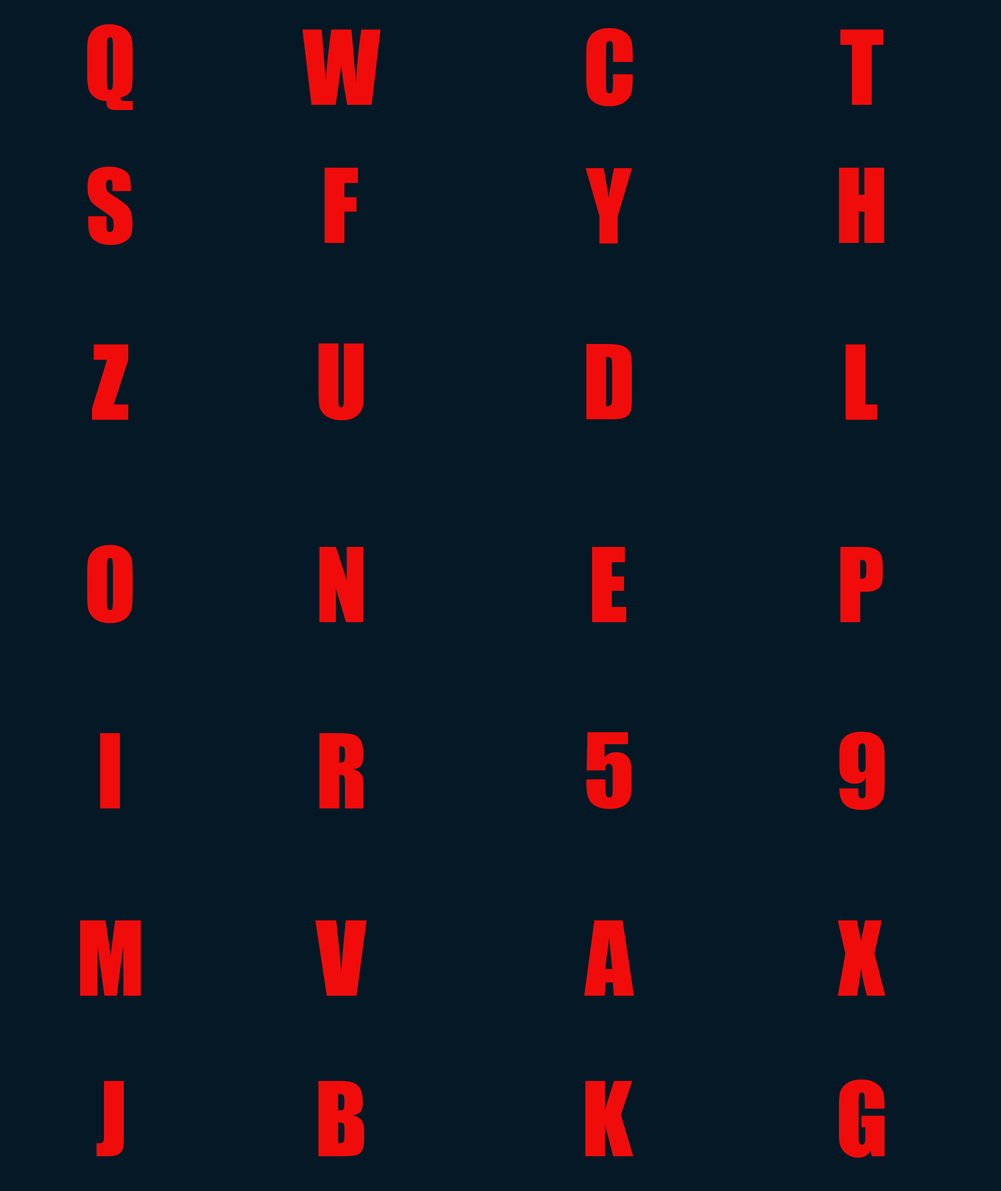
<style>
.page{position:relative;width:1001px;height:1191px;background:#041925}
.page>*{position:absolute;margin:0}
.t1{font:95.3px "Impact";color:#f10c0c}
</style>
<div class="page">
<p class="t1" style="left:87px;top:24px;width:46px;height:86px">Q</p>
<p class="t1" style="left:302px;top:30px;width:78px;height:75px">W</p>
<p class="t1" style="left:586px;top:28px;width:47px;height:78px">C</p>
<p class="t1" style="left:840px;top:30px;width:44px;height:75px">T</p>
<p class="t1" style="left:87px;top:167px;width:45px;height:78px">S</p>
<p class="t1" style="left:325px;top:168px;width:33px;height:75px">F</p>
<p class="t1" style="left:585px;top:168px;width:47px;height:76px">Y</p>
<p class="t1" style="left:839px;top:168px;width:45px;height:75px">H</p>
<p class="t1" style="left:92px;top:345px;width:36px;height:75px">Z</p>
<p class="t1" style="left:318px;top:344px;width:46px;height:76px">U</p>
<p class="t1" style="left:586px;top:344px;width:46px;height:75px">D</p>
<p class="t1" style="left:845px;top:345px;width:32px;height:75px">L</p>
<p class="t1" style="left:87px;top:545px;width:46px;height:78px">O</p>
<p class="t1" style="left:319px;top:547px;width:44px;height:75px">N</p>
<p class="t1" style="left:592px;top:547px;width:34px;height:75px">E</p>
<p class="t1" style="left:840px;top:547px;width:43px;height:75px">P</p>
<p class="t1" style="left:100px;top:733px;width:20px;height:76px">I</p>
<p class="t1" style="left:319px;top:733px;width:44px;height:76px">R</p>
<p class="t1" style="left:586px;top:733px;width:45px;height:76px">5</p>
<p class="t1" style="left:839px;top:732px;width:46px;height:78px">9</p>
<p class="t1" style="left:80px;top:921px;width:61px;height:75px">M</p>
<p class="t1" style="left:315px;top:921px;width:51px;height:75px">V</p>
<p class="t1" style="left:584px;top:921px;width:50px;height:75px">A</p>
<p class="t1" style="left:837px;top:921px;width:48px;height:75px">X</p>
<p class="t1" style="left:96px;top:1081px;width:28px;height:76px">J</p>
<p class="t1" style="left:318px;top:1081px;width:46px;height:76px">B</p>
<p class="t1" style="left:585px;top:1081px;width:48px;height:76px">K</p>
<p class="t1" style="left:839px;top:1080px;width:46px;height:78px">G</p>
</div>
